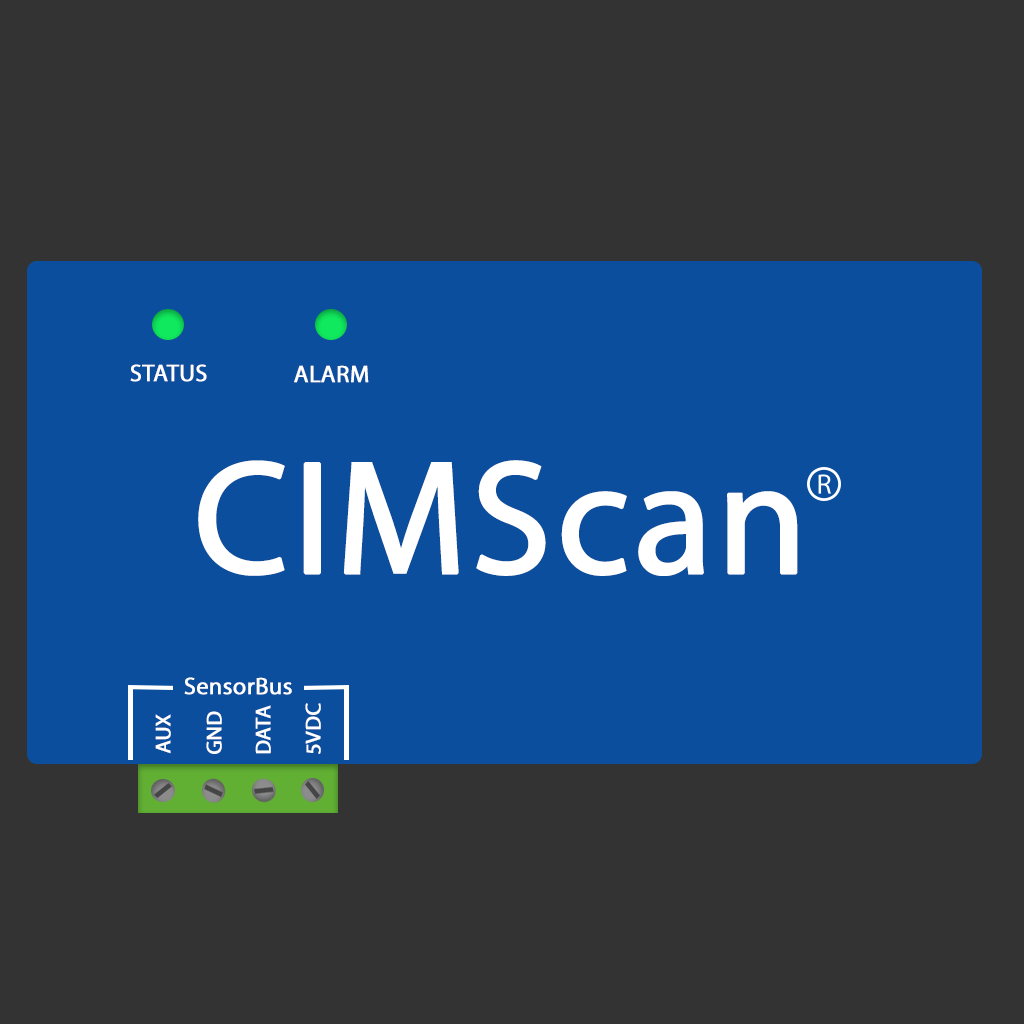
<style>
.page{position:relative;width:1024px;height:1024px;background:#333333}
.page>*{position:absolute;margin:0}
.t1{font:24px "MyriadPro-Regular";color:#ffffff;text-transform:uppercase;font-weight:bold}
.t2{font:162.6px "MyriadPro-Regular";color:#ffffff;text-transform:uppercase;font-weight:bold}
.t3{font:162.6px "MyriadPro-Regular";color:#ffffff;font-weight:bold}
.t4{font:24px "MyriadPro-Regular";color:#ffffff;font-weight:bold}
.t5{font:21.3px "MyriadPro-Regular";color:#ffffff;text-transform:uppercase;font-weight:bold}
</style>
<div class="page">
<p class="t1" style="left:130px;top:364px;width:77px;height:18px">Status</p>
<p class="t1" style="left:294px;top:365px;width:75px;height:18px">Alarm</p>
<p class="t2" style="left:198px;top:460px;width:600px;height:116px">CIMS<span class="t3">can</span></p>
<p class="t4" style="left:184px;top:677px;width:108px;height:18px">SensorBus</p>
<p class="t5" style="left:206px;top:711px;width:16px;height:43px;rotate:-90deg">Gnd</p>
<p class="t5" style="left:255px;top:705px;width:16px;height:49px;rotate:-90deg">data</p>
<p class="t5" style="left:305px;top:703px;width:16px;height:51px;rotate:-90deg">5vdc</p>
<p class="t5" style="left:155px;top:714px;width:16px;height:40px;rotate:-90deg">aux</p>
</div>
